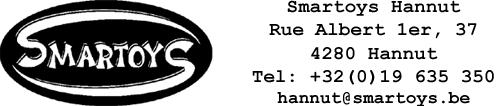
<style>
.page{position:relative;width:500px;height:106px;background:#ffffff}
.page>*{position:absolute;margin:0}
.t1{font:19.4px "CourierNewPS-BoldMT";color:#000000}
.t2{font:17.9px "CourierNewPS-BoldMT";color:#000000}
</style>
<div class="page">
<p class="t1" style="left:252px;top:0px;width:242px;height:107px;text-align:center">Smartoys Hannut<br>Rue Albert 1er, 37<br>4280 Hannut<br>Tel: +32(0)19 635 350<br><span class="t2">hannut@smartoys.be</span></p>
</div>
